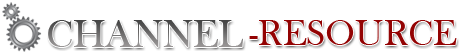
<style>
.page{position:relative;width:461px;height:53px;background:#ffffff}
.page>*{position:absolute;margin:0}
.t1{font:40px "BaskOldFace"}
.t2{font:37.4px "BaskOldFace";color:#930303}
</style>
<div class="page">
<p class="t1" style="left:48px;top:20px;width:195px;height:27px">CHANNEL</p>
<p class="t2" style="left:249px;top:20px;width:208px;height:25px">-RESOURCE</p>
</div>
